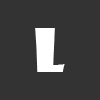
<style>
.page{position:relative;width:100px;height:100px;background:#333333}
.page>*{position:absolute;margin:0}
.t1{font:58.3px "ShowcardGothic-Reg";color:#ffffff}
</style>
<div class="page">
<p class="t1" style="left:35px;top:28px;width:30px;height:44px">l</p>
</div>
